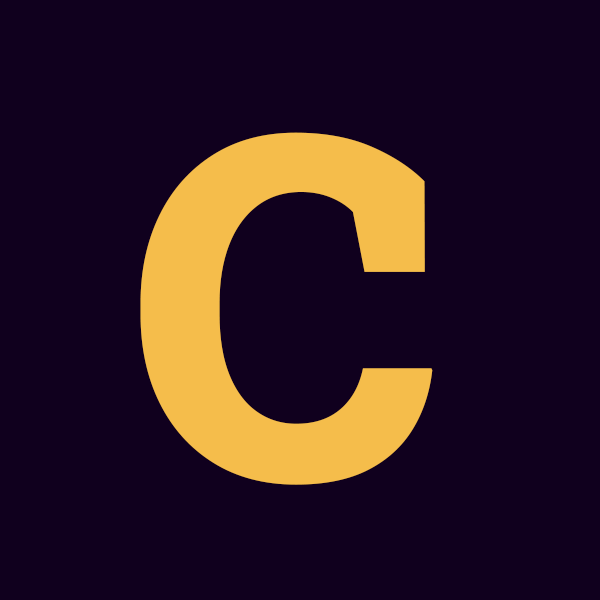
<style>
.page{position:relative;width:600px;height:600px;background:#10001e}
.page>*{position:absolute;margin:0}
.t1{font:641.7px "RobotoSlab-Medium";color:#f5bd4b}
</style>
<div class="page">
<p class="t1" style="left:140px;top:132px;width:293px;height:353px">c</p>
</div>
